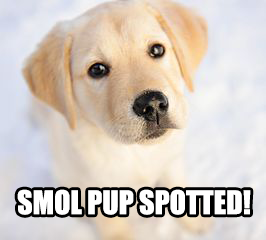
<style>
.page{position:relative;width:266px;height:240px}
.page>*{position:absolute;margin:0}
.t1{font:30px "Impact";color:#ffffff}
</style>
<div class="page">
<p class="t1" style="left:17px;top:189px;width:234px;height:26px">SMOL PUP SPOTTED!</p>
</div>
